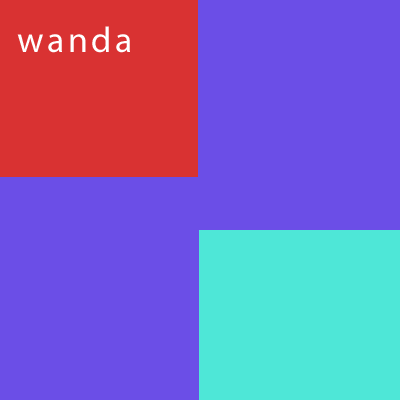
<style>
.page{position:relative;width:400px;height:400px;background:#6b4ee7}
.page>*{position:absolute;margin:0}
.t1{font:36px "MyriadPro-Regular";letter-spacing:0.1em;color:#ffffff}
</style>
<div class="page">
<p class="t1" style="left:17px;top:26px;width:113px;height:27px">wanda</p>
</div>
